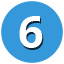
<style>
.page{position:relative;width:64px;height:64px;background:#3498db}
.page>*{position:absolute;margin:0}
.t1{font:45px "OpenSans-Bold";letter-spacing:-0.01em;color:#ffffff}
</style>
<div class="page">
<p class="t1" style="left:19px;top:16px;width:24px;height:32px">6</p>
</div>
